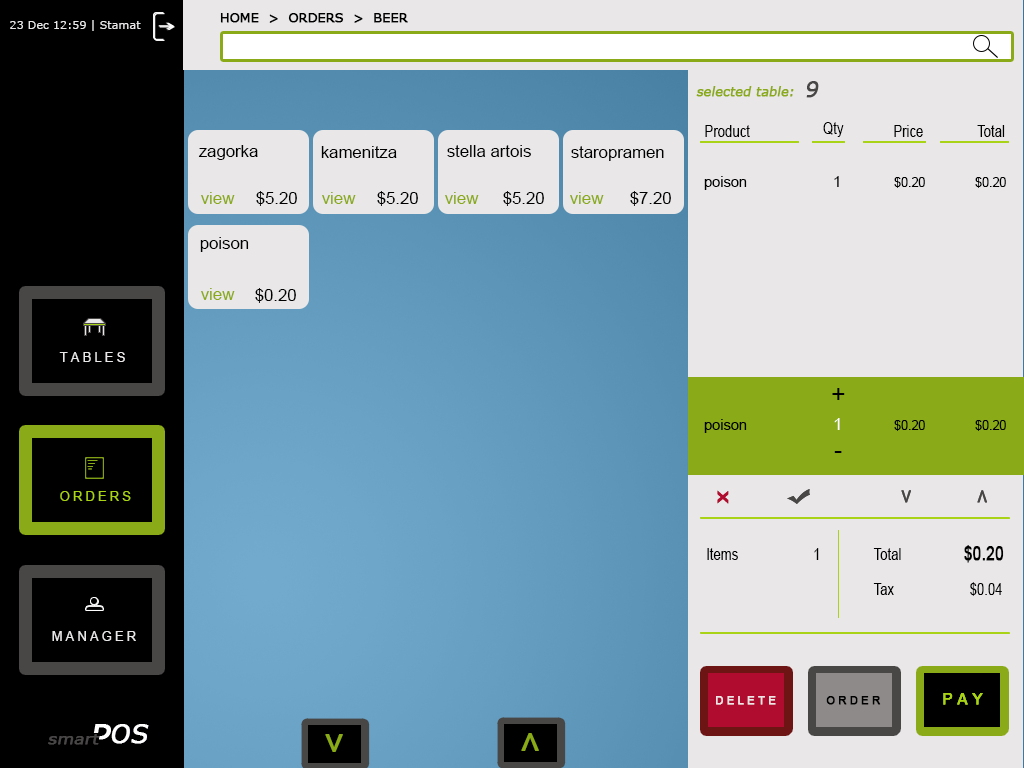
<style>
.page{position:relative;width:1024px;height:768px;background:#e9e7e7}
.page>*{position:absolute;margin:0}
.t1{font:12.5px "Verdana";color:#000000;font-weight:bold}
.t2{font:11.2px "Verdana";color:#e9e7e7}
.t3{font:12.5px "Verdana";color:#8aab17;font-weight:bold;font-style:italic}
.t4{font:20.8px "Verdana";color:#494646;font-weight:bold;font-style:italic}
.t5{font:16.2px "ArialMT";color:#000000;scale:0.81 1}
.t6{font:16.7px "ArialMT";color:#000000}
.t7{font:14.6px "ArialMT";color:#000000}
.t8{font:12.5px "ArialMT";color:#000000}
.t9{font:16.7px "ArialMT";color:#8aab17}
.t10{font:12.5px "ArialMT";color:#e9e7e7}
.t11{font:25px "ArialMT";color:#000000}
.t12{font:16.7px "ArialMT";color:#ffffff}
.t13{font:12.5px "ArialMT";color:#a9d316}
.t14{font:19.8px "ArialMT";color:#b00c2f;font-weight:bold;scale:1.23 1}
.t15{font:19.8px "ArialMT";color:#494646;font-weight:bold;scale:1.23 1}
.t16{font:18.8px "ArialMT";color:#000000;font-weight:bold;scale:0.81 1}
.t17{font:10.6px "ArialMT";color:#efe7e7;font-weight:bold}
.t18{font:10.6px "ArialMT";color:#000000;font-weight:bold}
.t19{font:14.6px "ArialMT";color:#a9d316;font-weight:bold}
.t20{font:25px "Verdana";color:#ffffff;font-weight:bold;font-style:italic}
.t21{font:15px "Verdana";color:#494646;font-weight:bold;font-style:italic;scale:1.11 1}
.t22{font:34.9px "ArialMT";color:#8aab17;font-weight:bold}
</style>
<div class="page">
<p class="t1" style="left:220px;top:13px;width:188px;height:10px">HOME  &gt;  ORDERS  &gt;  BEER</p>
<p class="t2" style="left:10px;top:20px;width:131px;height:11px">23 Dec 12:59 | Stamat</p>
<p class="t3" style="left:696px;top:86px;width:98px;height:11px">selected table:</p>
<p class="t4" style="left:806px;top:81px;width:13px;height:17px">9</p>
<p class="t5" style="left:705px;top:125px;width:45px;height:12px">Product</p>
<p class="t5" style="left:823px;top:122px;width:21px;height:15px">Qty</p>
<p class="t5" style="left:894px;top:125px;width:29px;height:12px">Price</p>
<p class="t5" style="left:977px;top:125px;width:28px;height:12px">Total</p>
<p class="t6" style="left:198px;top:145px;width:60px;height:15px">zagorka</p>
<p class="t6" style="left:321px;top:146px;width:76px;height:12px">kamenitza</p>
<p class="t6" style="left:447px;top:145px;width:84px;height:12px">stella artois</p>
<p class="t6" style="left:571px;top:146px;width:93px;height:15px">staropramen</p>
<p class="t7" style="left:704px;top:176px;width:43px;height:14px">poison</p>
<p class="t7" style="left:834px;top:176px;width:5px;height:11px">1</p>
<p class="t8" style="left:894px;top:177px;width:31px;height:11px">$0.20</p>
<p class="t8" style="left:975px;top:177px;width:31px;height:11px">$0.20</p>
<p class="t9" style="left:201px;top:192px;width:34px;height:12px">view</p>
<p class="t6" style="left:256px;top:191px;width:41px;height:15px">$5.20</p>
<p class="t9" style="left:322px;top:192px;width:34px;height:12px">view</p>
<p class="t6" style="left:377px;top:191px;width:41px;height:15px">$5.20</p>
<p class="t9" style="left:445px;top:192px;width:34px;height:12px">view</p>
<p class="t6" style="left:503px;top:191px;width:41px;height:15px">$5.20</p>
<p class="t9" style="left:570px;top:192px;width:34px;height:12px">view</p>
<p class="t6" style="left:630px;top:191px;width:41px;height:15px">$7.20</p>
<p class="t6" style="left:200px;top:237px;width:49px;height:15px">poison</p>
<p class="t9" style="left:201px;top:288px;width:34px;height:12px">view</p>
<p class="t6" style="left:255px;top:288px;width:41px;height:15px">$0.20</p>
<p class="t10" style="left:59px;top:352px;width:66px;height:10px">T A B L E S</p>
<p class="t11" style="left:832px;top:388px;width:13px;height:12px">+</p>
<p class="t11" style="left:832px;top:388px;width:13px;height:12px">+</p>
<p class="t7" style="left:704px;top:419px;width:43px;height:14px">poison</p>
<p class="t7" style="left:704px;top:419px;width:43px;height:14px">poison</p>
<p class="t12" style="left:834px;top:418px;width:6px;height:12px">1</p>
<p class="t12" style="left:834px;top:418px;width:6px;height:12px">1</p>
<p class="t8" style="left:894px;top:420px;width:31px;height:11px">$0.20</p>
<p class="t8" style="left:894px;top:420px;width:31px;height:11px">$0.20</p>
<p class="t8" style="left:975px;top:420px;width:31px;height:11px">$0.20</p>
<p class="t8" style="left:975px;top:420px;width:31px;height:11px">$0.20</p>
<p class="t11" style="left:834px;top:451px;width:8px;height:2px">-</p>
<p class="t11" style="left:834px;top:451px;width:8px;height:2px">-</p>
<p class="t13" style="left:60px;top:491px;width:71px;height:10px">O R D E R S</p>
<p class="t14" style="left:717px;top:490px;width:12px;height:14px;rotate:-90deg">x</p>
<p class="t14" style="left:717px;top:490px;width:12px;height:14px;rotate:-90deg">x</p>
<p class="t15" style="left:901px;top:490px;width:10px;height:13px;rotate:90deg">&gt;</p>
<p class="t15" style="left:901px;top:490px;width:10px;height:13px;rotate:90deg">&gt;</p>
<p class="t15" style="left:977px;top:490px;width:10px;height:13px;rotate:-90deg">&gt;</p>
<p class="t15" style="left:977px;top:490px;width:10px;height:13px;rotate:-90deg">&gt;</p>
<p class="t16" style="left:964px;top:545px;width:40px;height:18px">$0.20</p>
<p class="t5" style="left:707px;top:548px;width:31px;height:12px">Items</p>
<p class="t5" style="left:814px;top:548px;width:5px;height:12px">1</p>
<p class="t5" style="left:873px;top:548px;width:28px;height:12px">Total</p>
<p class="t5" style="left:970px;top:582px;width:32px;height:14px">$0.04</p>
<p class="t5" style="left:873px;top:583px;width:21px;height:12px">Tax</p>
<p class="t10" style="left:52px;top:631px;width:84px;height:10px">M A N A G E R</p>
<p class="t17" style="left:716px;top:696px;width:60px;height:9px">D E L E T E</p>
<p class="t18" style="left:826px;top:696px;width:55px;height:9px">O R D E R</p>
<p class="t19" style="left:943px;top:693px;width:40px;height:12px">P A Y</p>
<p class="t19" style="left:943px;top:693px;width:40px;height:12px">P A Y</p>
<p class="t20" style="left:111px;top:724px;width:38px;height:20px">OS</p>
<p class="t20" style="left:112px;top:724px;width:38px;height:20px">OS</p>
<p class="t21" style="left:48px;top:734px;width:52px;height:11px">smart</p>
<p class="t22" style="left:325px;top:734px;width:18px;height:18px;rotate:-90deg">&lt;</p>
<p class="t22" style="left:521px;top:733px;width:18px;height:18px;rotate:-90deg">&gt;</p>
</div>
